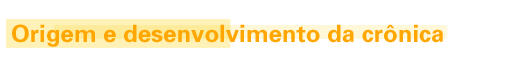
<style>
.page{position:relative;width:515px;height:70px;background:#ffffff}
.page>*{position:absolute;margin:0}
.t1{font:24px "Univers-Bold";color:#ffa600}
</style>
<div class="page">
<p class="t1" style="left:12px;top:24px;width:431px;height:23px">Origem e desenvolvimento da crônica</p>
</div>
